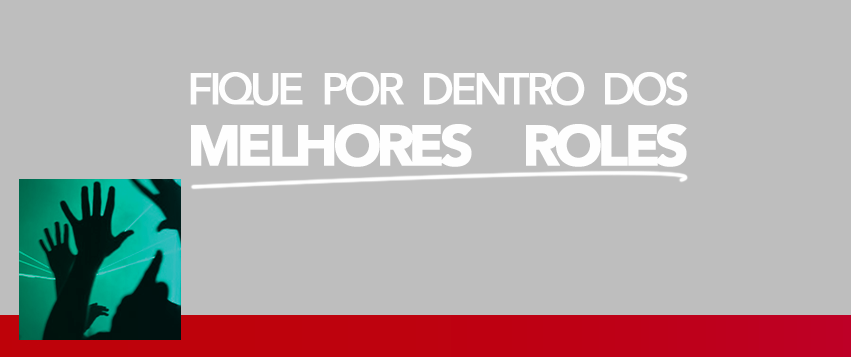
<style>
.page{position:relative;width:851px;height:357px;background:#bebebe}
.page>*{position:absolute;margin:0}
.t1{font:43.1px/61.3px "AvenirLTStd-Medium";letter-spacing:-0.1em;color:#fefefe;text-transform:uppercase;font-weight:bold}
.t2{font:56.5px/61.3px "AvenirLTStd-Black";letter-spacing:-0.1em;color:#fefefe;text-transform:uppercase;font-weight:bold}
</style>
<div class="page">
<p class="t1" style="left:190px;top:72px;width:498px;height:95px;text-align:justify">fIQUE  POR  DENTRO  DOS<br><span class="t2">melhores  roles</span></p>
</div>
